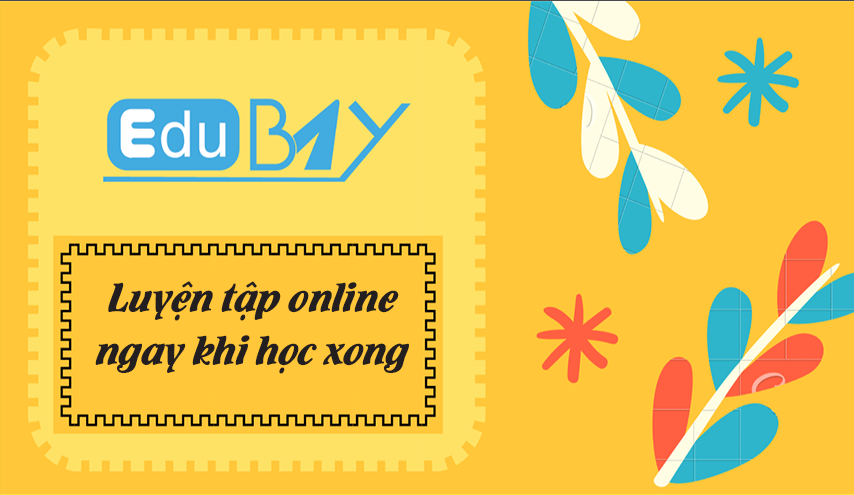
<style>
.page{position:relative;width:854px;height:495px;background:#ffc739}
.page>*{position:absolute;margin:0}
.t1{font:43.6px "UTM-Flamenco";color:#231f20}
</style>
<div class="page">
<p class="t1" style="left:95px;top:281px;width:314px;height:93px;text-align:center">Luyện tập online<br> ngay khi học xong</p>
</div>
